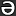
<style>
.page{position:relative;width:16px;height:16px;background:#333333}
.page>*{position:absolute;margin:0}
.t1{font:20px "SegoeUI-Bold";color:#ffffff}
</style>
<div class="page">
<p class="t1" style="left:1px;top:0px;width:14px;height:16px">Ə</p>
</div>
